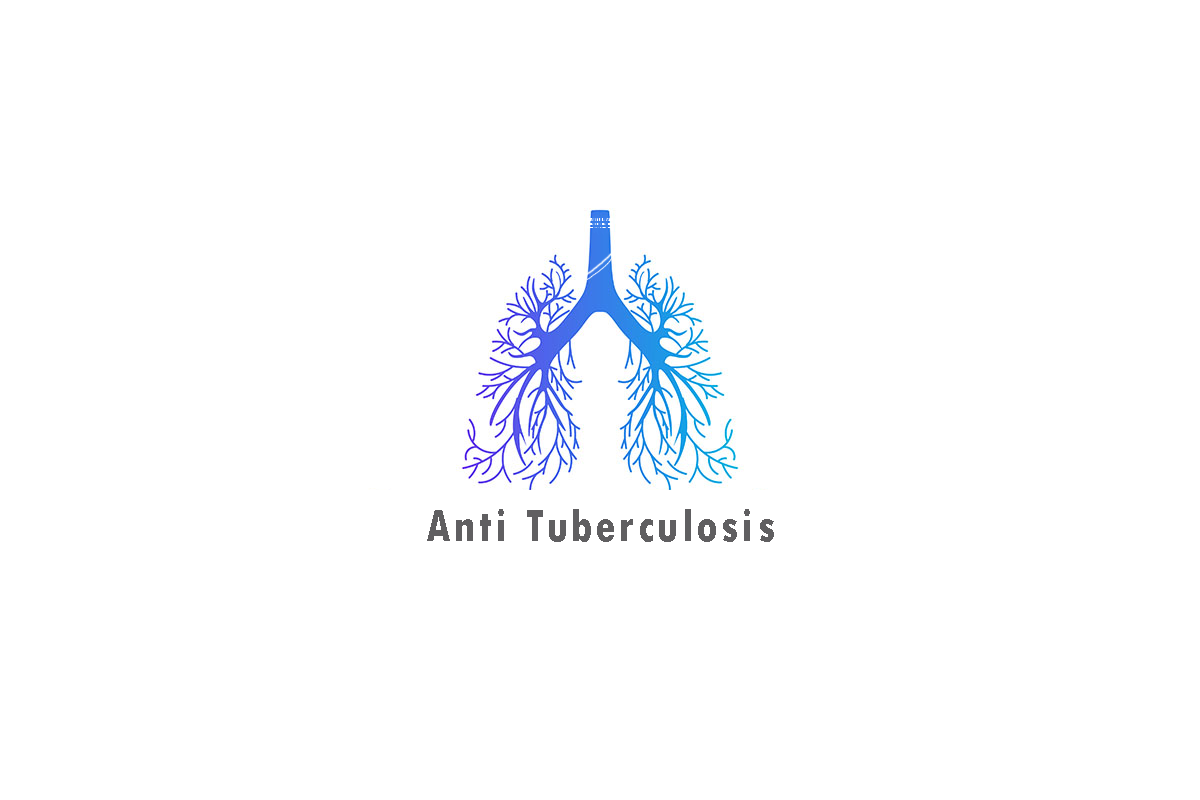
<style>
.page{position:relative;width:1200px;height:800px;background:#ffffff}
.page>*{position:absolute;margin:0}
.t1{font:46.7px "TwCenMT-CondensedExtraBold";letter-spacing:0.08em;color:#605f61}
</style>
<div class="page">
<p class="t1" style="left:427px;top:509px;width:347px;height:33px">Anti Tuberculosis</p>
</div>
